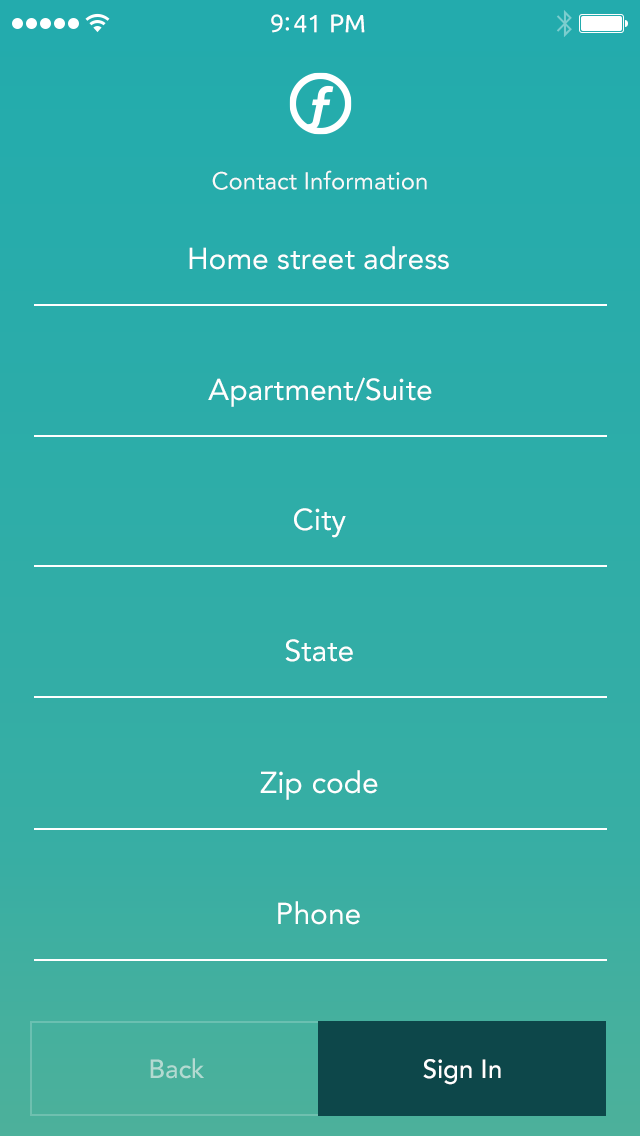
<style>
.page{position:relative;width:640px;height:1136px}
.page>*{position:absolute;margin:0}
.t1{font:25px "Ubuntu";color:#ffffff}
.t2{font:24px "Avenir-Roman";color:#f9f9f9}
.t3{font:30px "Avenir-Roman";color:#ffffff}
.t4{font:26px "Avenir-Medium";color:#b3dad1}
.t5{font:26px "Avenir-Medium";color:#ffffff}
</style>
<div class="page">
<p class="t1" style="left:271px;top:14px;width:94px;height:19px">9:41 PM</p>
<p class="t2" style="left:212px;top:170px;width:215px;height:20px">Contact Information</p>
<p class="t3" style="left:189px;top:246px;width:260px;height:24px">Home street adress</p>
<p class="t3" style="left:208px;top:377px;width:224px;height:30px">Apartment/Suite</p>
<p class="t3" style="left:294px;top:508px;width:52px;height:30px">City</p>
<p class="t3" style="left:285px;top:639px;width:68px;height:23px">State</p>
<p class="t3" style="left:260px;top:770px;width:118px;height:30px">Zip code</p>
<p class="t3" style="left:278px;top:901px;width:82px;height:24px">Phone</p>
<p class="t4" style="left:150px;top:1058px;width:54px;height:21px">Back</p>
<p class="t5" style="left:423px;top:1059px;width:78px;height:26px">Sign In</p>
</div>
